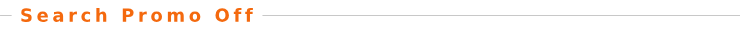
<style>
.page{position:relative;width:740px;height:30px;background:#ffffff}
.page>*{position:absolute;margin:0}
.t1{font:18px "ArialNarrow-Bold";letter-spacing:0.2em;color:#f4690e}
</style>
<div class="page">
<p class="t1" style="left:21px;top:8px;width:232px;height:14px">Search Promo Off</p>
</div>
